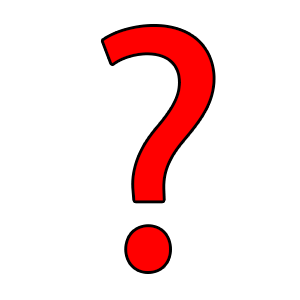
<style>
.page{position:relative;width:300px;height:300px;background:#ffffff}
.page>*{position:absolute;margin:0}
.t1{font:350px "MyriadPro-Regular";color:#ff0000}
</style>
<div class="page">
<p class="t1" style="left:103px;top:26px;width:110px;height:245px">?</p>
</div>
